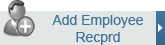
<style>
.page{position:relative;width:165px;height:45px;background:#e3e6e7}
.page>*{position:absolute;margin:0}
.t1{font:14px "ArialMT";color:#417398}
</style>
<div class="page">
<p class="t1" style="left:52px;top:15px;width:91px;height:30px;text-align:center">Add Employee<br>Recprd</p>
</div>
